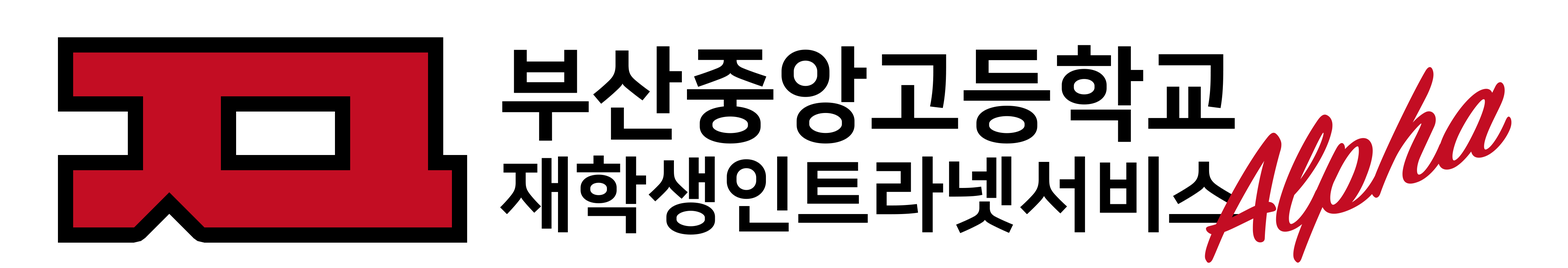
<style>
.page{position:relative;width:1568px;height:268px;background:#ffffff}
.page>*{position:absolute;margin:0}
.t1{font:81.5px/110.4px "NanumSquareOTFEB";color:#000000}
.t2{font:101.4px/110.4px "NanumSquareOTFEB";color:#000000}
.t3{font:163px "SignPainter-HouseScriptSemibold";color:#c30d23;scale:1.07 1}
</style>
<div class="page">
<p class="t1" style="left:500px;top:45px;width:739px;height:190px"><span class="t2">부산중앙고등학교<br></span>재학생인트라넷서비스</p>
<p class="t3" style="left:1205px;top:67px;width:307px;height:196px;rotate:-21deg">Alpha</p>
</div>
